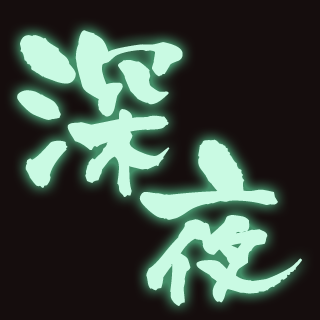
<style>
.page{position:relative;width:320px;height:320px;background:#150d0d}
.page>*{position:absolute;margin:0}
.t1{font:180px "KyoMadoka";color:#c9fae3;font-weight:bold}
</style>
<div class="page">
<p class="t1" style="left:17px;top:30px;width:166px;height:167px">深</p>
<p class="t1" style="left:139px;top:139px;width:163px;height:167px">夜</p>
</div>
